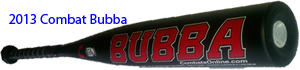
<style>
.page{position:relative;width:300px;height:70px;background:#ffffff}
.page>*{position:absolute;margin:0}
.t1{font:14px "MyriadPro-Regular";color:#0000ff}
</style>
<div class="page">
<p class="t1" style="left:9px;top:14px;width:118px;height:10px">2013 Combat Bubba</p>
</div>
